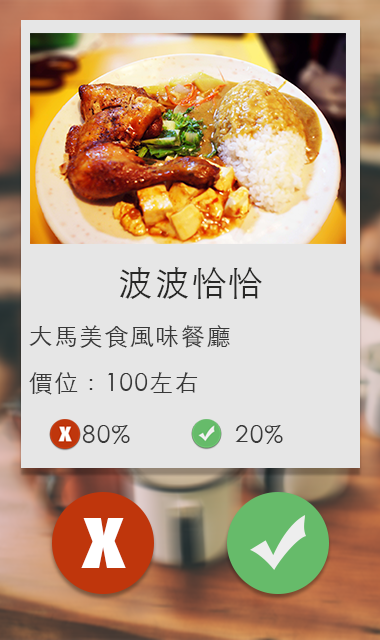
<style>
.page{position:relative;width:380px;height:640px;background:#e6e6e6}
.page>*{position:absolute;margin:0}
.t1{font:34.5px "STHeitiTC-Light";letter-spacing:0.06em;color:#282827}
.t2{font:24px "STHeitiTC-Light";letter-spacing:0.06em;color:#383838}
</style>
<div class="page">
<p class="t1" style="left:120px;top:267px;width:142px;height:32px">波波恰恰</p>
<p class="t2" style="left:29px;top:325px;width:201px;height:23px">大馬美食風味餐廳</p>
<p class="t2" style="left:29px;top:372px;width:169px;height:23px">價位：100左右</p>
<p class="t2" style="left:82px;top:424px;width:48px;height:20px">80%</p>
<p class="t2" style="left:235px;top:425px;width:48px;height:19px">20%</p>
</div>
